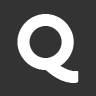
<style>
.page{position:relative;width:96px;height:96px;background:#333333}
.page>*{position:absolute;margin:0}
.t1{font:72px "Paralex-Regular2";color:#ffffff}
</style>
<div class="page">
<p class="t1" style="left:17px;top:14px;width:62px;height:69px">Q</p>
</div>
